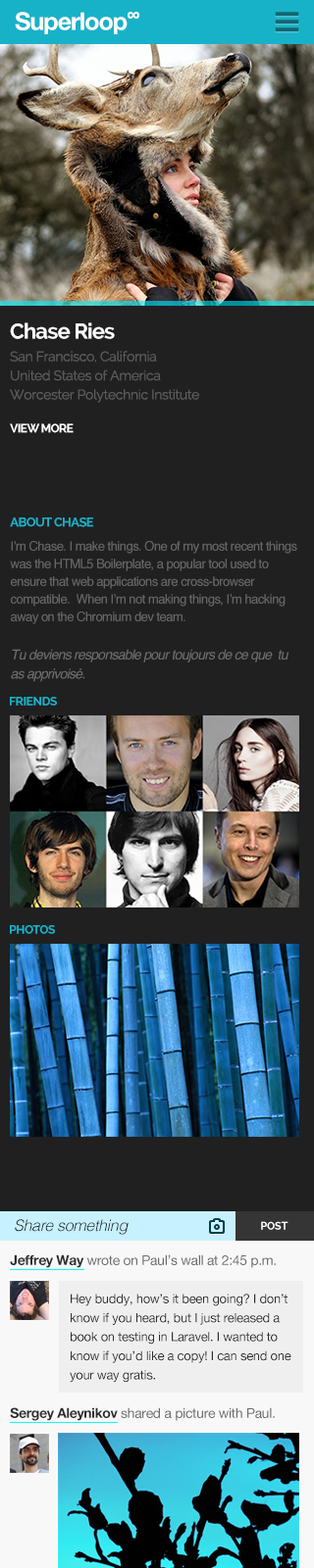
<style>
.page{position:relative;width:314px;height:1568px;background:#202020}
.page>*{position:absolute;margin:0}
.t1{font:24.5px "HelveticaNeue-Bold";letter-spacing:-0.04em;color:#ffffff}
.t2{font:16.7px "Helvetica-Bold";letter-spacing:-0.04em;color:#ffffff}
.t3{font:21.6px "Raleway-Bold";letter-spacing:-0.04em;color:#ffffff}
.t4{font:13.6px/19.1px "Raleway-Regular";letter-spacing:-0.02em;color:#5b5b5b}
.t5{font:11.8px "Raleway-Bold";letter-spacing:-0.04em;color:#ffffff}
.t6{font:12.7px "Raleway-Bold";letter-spacing:-0.04em;color:#18b2c8}
.t7{font:12.7px/17.6px "Helvetica";letter-spacing:-0.04em;color:#666666}
.t8{font:13.6px/19.1px "Helvetica-Oblique";letter-spacing:-0.02em;color:#6d6d6d}
.t9{font:13.6px "Helvetica-Oblique";letter-spacing:-0.05em;color:#6d6d6d}
.t10{font:11.8px "Raleway-Bold";letter-spacing:-0.02em;color:#18b2c8}
.t11{font:15.7px "Helvetica-LightOblique";letter-spacing:-0.02em;color:#212121}
.t12{font:10.8px "Raleway-Bold";letter-spacing:-0.02em;color:#ffffff}
.t13{font:13.6px "HelveticaNeue";letter-spacing:-0.02em;color:#6d6d6d}
.t14{font:13.6px "HelveticaNeue-Bold";letter-spacing:-0.02em;color:#2d2d2d}
.t15{font:12.7px/19.1px "HelveticaNeue";letter-spacing:-0.02em;color:#2d2d2d}
</style>
<div class="page">
<p class="t1" style="left:15px;top:12px;width:112px;height:22px">Superloop</p>
<p class="t2" style="left:127px;top:12px;width:12px;height:7px">∞</p>
<p class="t3" style="left:10px;top:322px;width:105px;height:17px">Chase Ries</p>
<p class="t4" style="left:10px;top:351px;width:189px;height:52px">San Francisco, California<br>United States of America<br>Worcester Polytechnic Institute</p>
<p class="t5" style="left:10px;top:423px;width:64px;height:10px">VIEW MORE</p>
<p class="t6" style="left:10px;top:517px;width:83px;height:10px">ABOUT CHASE</p>
<p class="t7" style="left:10px;top:541px;width:287px;height:141px">I’m Chase. I make things. One of my most recent things<br>was the HTML5 Boilerplate, a popular tool used to<br>ensure that web applications are cross-browser <br>compatible.  When I’m not making things, I’m hacking <br>away on the Chromium dev team.<br><br><span class="t8">T</span><span class="t9">u deviens responsable pour toujours de ce que  tu <br>as apprivoisé.</span></p>
<p class="t10" style="left:10px;top:697px;width:47px;height:9px">FRIENDS</p>
<p class="t10" style="left:10px;top:925px;width:45px;height:9px">PHOTOS</p>
<p class="t11" style="left:15px;top:1219px;width:113px;height:16px">Share something</p>
<p class="t12" style="left:261px;top:1221px;width:27px;height:9px">POST</p>
<p class="t13" style="left:10px;top:1254px;width:265px;height:14px"><span class="t14">Jeffrey Way </span>wrote on Paul’s wall at 2:45 p.m.</p>
<p class="t15" style="left:70px;top:1294px;width:221px;height:89px">Hey buddy, how’s it been going? I don’t <br>know if you heard, but I just released a <br>book on testing in Laravel. I wanted to <br>know if you’d like a copy! I can send one <br>your way gratis.</p>
<p class="t13" style="left:10px;top:1407px;width:264px;height:14px"><span class="t14">Sergey Aleynikov </span>shared a picture with Paul.</p>
</div>
